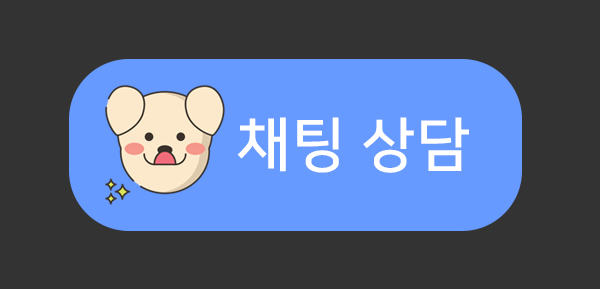
<style>
.page{position:relative;width:600px;height:289px;background:#333333}
.page>*{position:absolute;margin:0}
.t1{font:58.3px "NanumSquareB";letter-spacing:0.025em;color:#ffffff}
</style>
<div class="page">
<p class="t1" style="left:237px;top:117px;width:232px;height:56px">채팅 상담</p>
</div>
